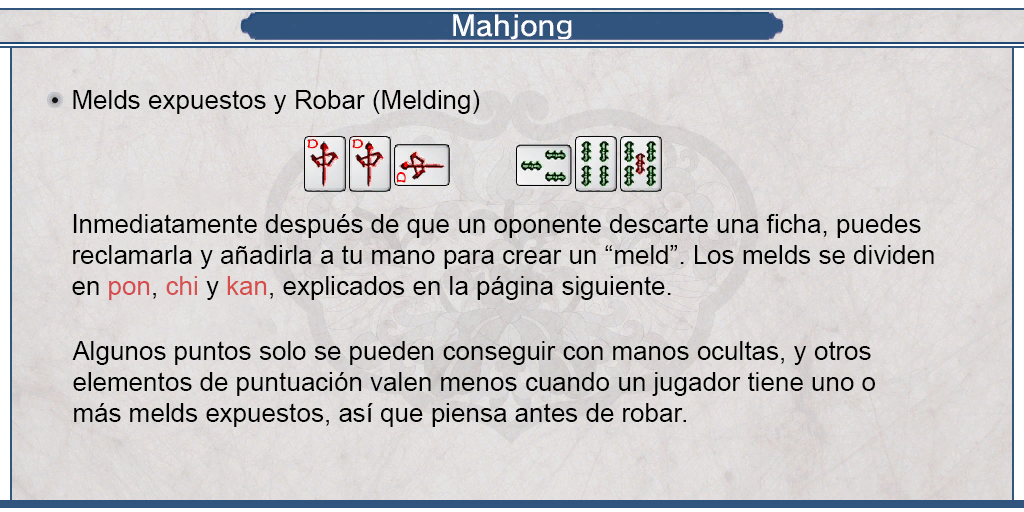
<style>
.page{position:relative;width:1024px;height:512px}
.page>*{position:absolute;margin:0}
.t1{font:26px "ArialMT";color:#000000}
.t2{font:26px "ArialMT";color:#d64b4e}
.t3{font:26px "ArialMT";color:#d65152}
.t4{font:26px "ArialMT";color:#d64d4a}
</style>
<div class="page">
<p class="t1" style="left:73px;top:90px;width:407px;height:24px">Melds expuestos y Robar (Melding)</p>
<p class="t1" style="left:72px;top:214px;width:862px;height:86px;text-align:justify">Inmediatamente después de que un oponente descarte una ficha, puedes <br>reclamarla y añadirla a tu mano para crear un “meld”. Los melds se dividen <br>en <span class="t2">pon</span>, <span class="t3">chi</span> y <span class="t4">kan</span>, explicados en la página siguiente.</p>
<p class="t1" style="left:72px;top:341px;width:803px;height:86px;text-align:justify">Algunos puntos solo se pueden conseguir con manos ocultas, y otros <br>elementos de puntuación valen menos cuando un jugador tiene uno o <br>más melds expuestos, así que piensa antes de robar.</p>
</div>
